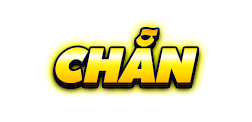
<style>
.page{position:relative;width:252px;height:122px;background:#ffffff}
.page>*{position:absolute;margin:0}
.t1{font:48px "UTM-Sharnay";font-weight:bold}
</style>
<div class="page">
<p class="t1" style="left:55px;top:29px;width:143px;height:54px">CHẴN</p>
</div>
